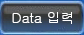
<style>
.page{position:relative;width:84px;height:35px}
.page>*{position:absolute;margin:0}
.t1{font:14px "Gulim";color:#ffffff}
</style>
<div class="page">
<p class="t1" style="left:12px;top:12px;width:60px;height:12px">Data 입력</p>
</div>
